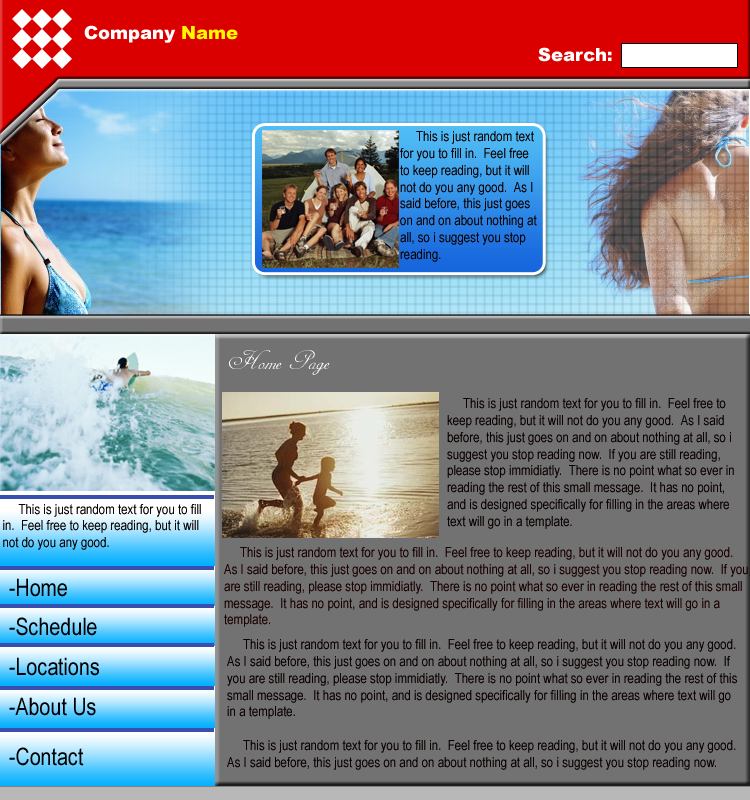
<style>
.page{position:relative;width:750px;height:800px;background:#727272}
.page>*{position:absolute;margin:0}
.t1{font:18px "Arial-Black";color:#ffffff}
.t2{font:18px "Arial-Black";color:#fff600}
.t3{font:14px "ArialNarrow";color:#0d0202}
.t4{font:30px "AdineKirnberg-Regular";color:#ffffff}
.t5{font:14px "ArialNarrow";color:#1b0202}
.t6{font:24px "ArialNarrow";color:#000000}
</style>
<div class="page">
<p class="t1" style="left:84px;top:25px;width:154px;height:18px">Company <span class="t2">Name</span></p>
<p class="t1" style="left:538px;top:47px;width:74px;height:15px">Search:</p>
<p class="t3" style="left:400px;top:131px;width:137px;height:131px">This is just random text for you to fill in.  Feel free to keep reading, but it will not do you any good.  As I said before, this just goes on and on about nothing at all, so i suggest you stop reading.</p>
<p class="t4" style="left:229px;top:350px;width:101px;height:25px">Home Page</p>
<p class="t3" style="left:447px;top:398px;width:287px;height:131px">This is just random text for you to fill in.  Feel free to keep reading, but it will not do you any good.  As I said before, this just goes on and on about nothing at all, so i suggest you stop reading now.  If you are still reading, please stop immidiatly.  There is no point what so ever in reading the rest of this small message.  It has no point, and is designed specifically for filling in the areas where text will go in a template.</p>
<p class="t3" style="left:3px;top:504px;width:198px;height:46px">This is just random text for you to fill in.  Feel free to keep reading, but it will not do you any good.</p>
<p class="t5" style="left:224px;top:547px;width:524px;height:80px">This is just random text for you to fill in.  Feel free to keep reading, but it will not do you any good.  As I said before, this just goes on and on about nothing at all, so i suggest you stop reading now.  If you are still reading, please stop immidiatly.  There is no point what so ever in reading the rest of this small message.  It has no point, and is designed specifically for filling in the areas where text will go in a template.</p>
<p class="t6" style="left:9px;top:578px;width:58px;height:19px">-Home</p>
<p class="t6" style="left:9px;top:617px;width:88px;height:19px">-Schedule</p>
<p class="t3" style="left:227px;top:639px;width:510px;height:131px">This is just random text for you to fill in.  Feel free to keep reading, but it will not do you any good.  As I said before, this just goes on and on about nothing at all, so i suggest you stop reading now.  If you are still reading, please stop immidiatly.  There is no point what so ever in reading the rest of this small message.  It has no point, and is designed specifically for filling in the areas where text will go in a template.<br><br>     This is just random text for you to fill in.  Feel free to keep reading, but it will not do you any good.  As I said before, this just goes on and on about nothing at all, so i suggest you stop reading now.</p>
<p class="t6" style="left:9px;top:657px;width:90px;height:19px">-Locations</p>
<p class="t6" style="left:9px;top:697px;width:87px;height:19px">-About Us</p>
<p class="t6" style="left:9px;top:747px;width:75px;height:19px">-Contact</p>
</div>
